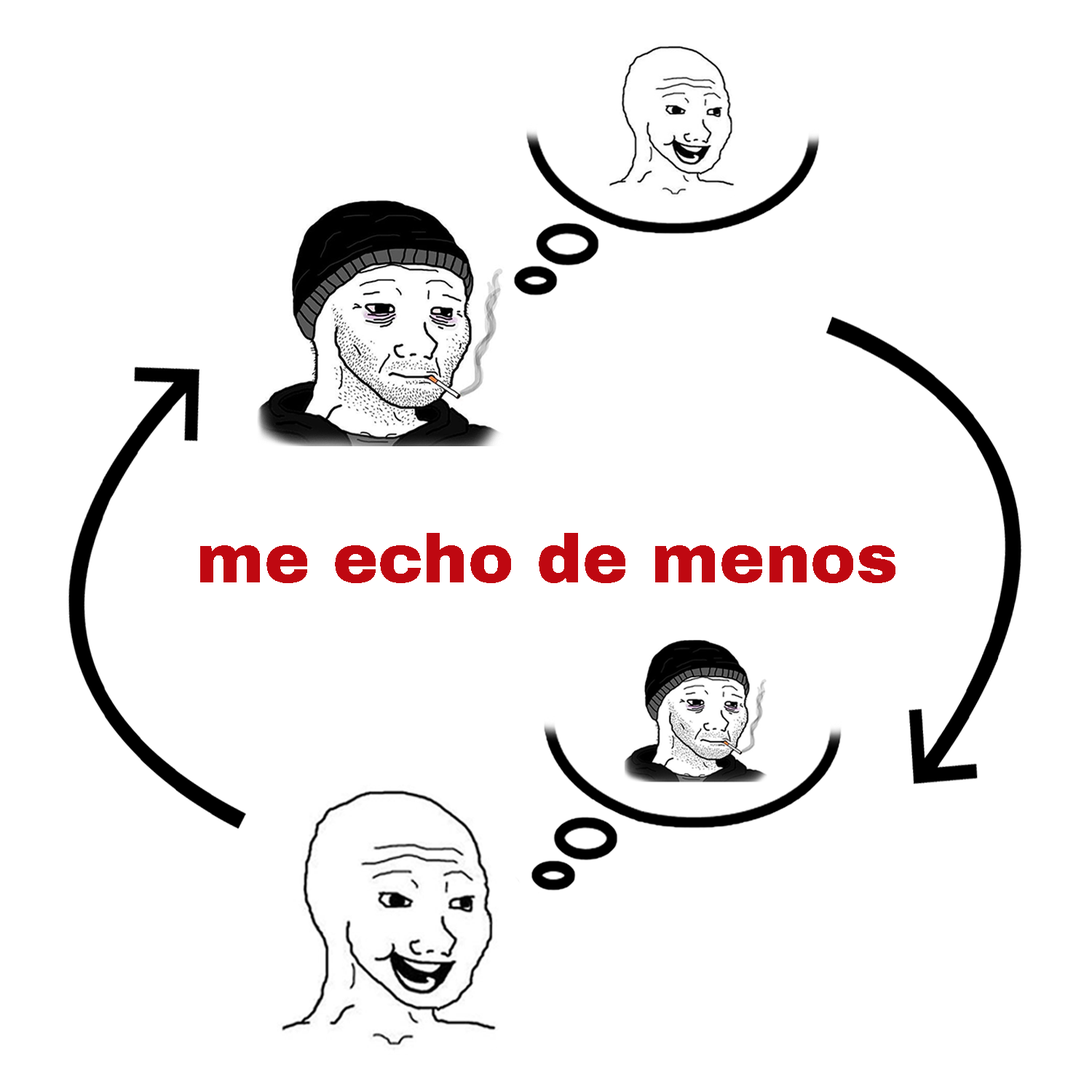
<style>
.page{position:relative;width:1092px;height:1092px;background:#ffffff}
.page>*{position:absolute;margin:0}
.t1{font:68.4px "ArchivoBlack-Regular";color:#bf0811}
</style>
<div class="page">
<p class="t1" style="left:200px;top:533px;width:695px;height:50px">me echo de menos</p>
</div>
